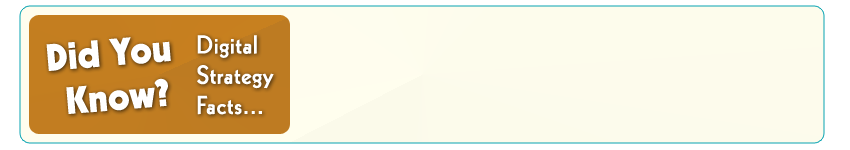
<style>
.page{position:relative;width:850px;height:150px}
.page>*{position:absolute;margin:0}
.t1{font:37.2px "Kabel-Black";color:#ffffff}
.t2{font:25.2px "Kabel-Heavy";letter-spacing:0.025em;color:#ffffff}
</style>
<div class="page">
<p class="t1" style="left:46px;top:37px;width:125px;height:77px;text-align:center;rotate:-5deg">Did You <br>Know?</p>
<p class="t2" style="left:197px;top:35px;width:77px;height:80px">Digital<br>Strategy<br>Facts...</p>
</div>
